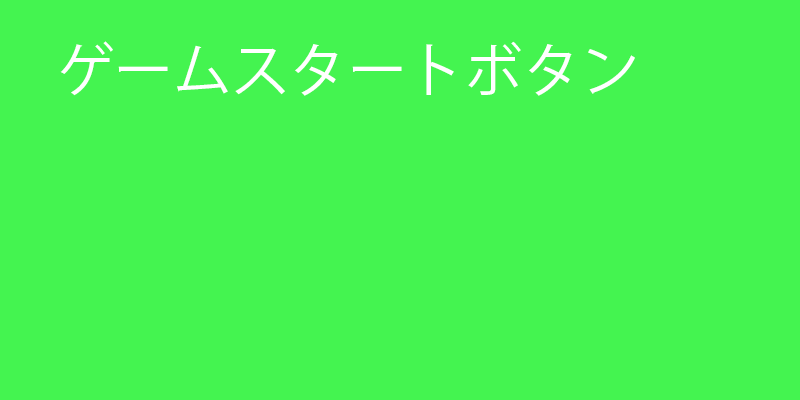
<style>
.page{position:relative;width:800px;height:400px;background:#44f450}
.page>*{position:absolute;margin:0}
.t1{font:58.3px "KozGoPr6N-Regular";color:#ffffff}
</style>
<div class="page">
<p class="t1" style="left:60px;top:41px;width:575px;height:55px">ゲームスタートボタン</p>
</div>
